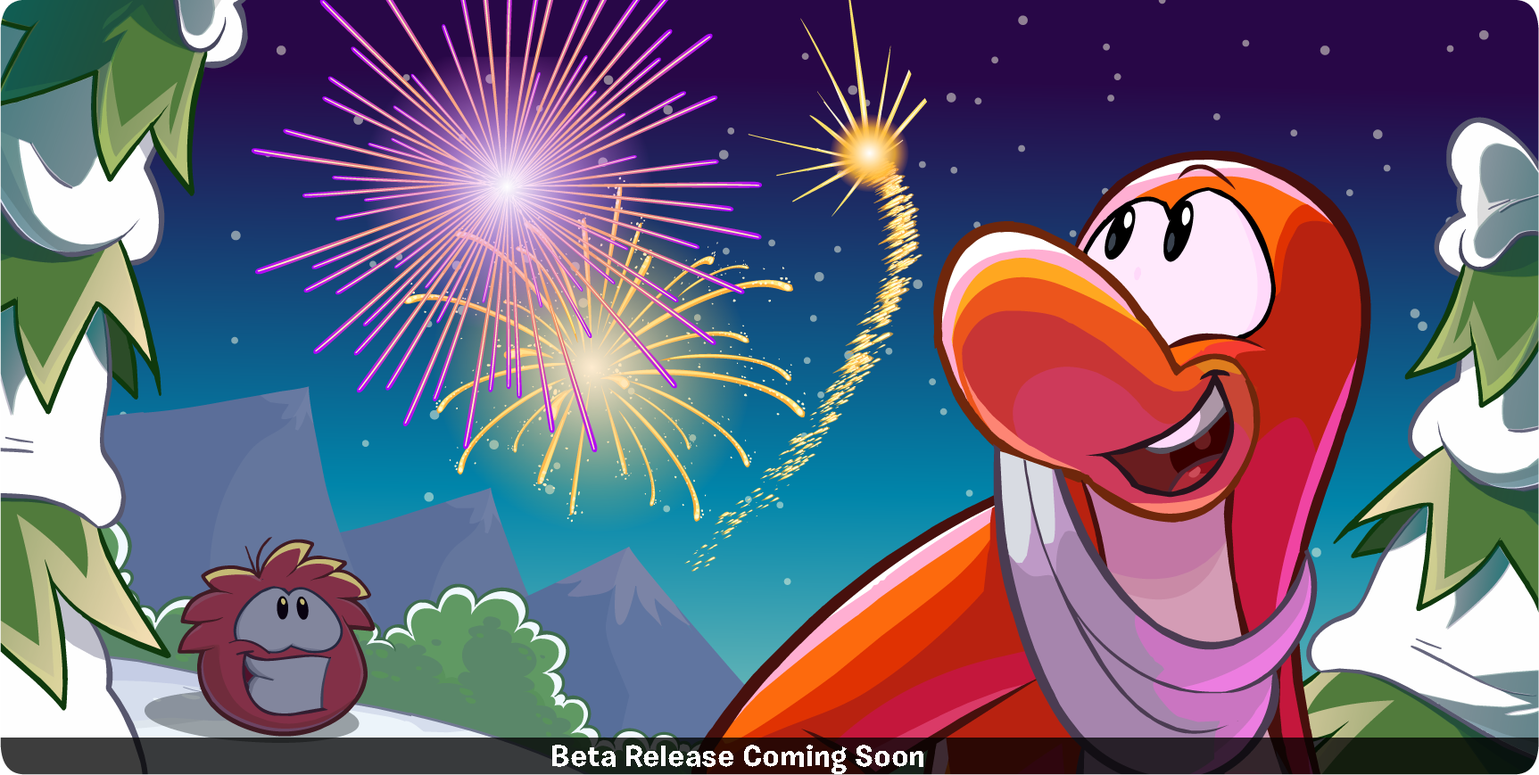
<style>
.page{position:relative;width:1539px;height:775px}
.page>*{position:absolute;margin:0}
.t1{font:29.7px "BurbankSmall-Bold";color:#ffffff}
</style>
<div class="page">
<p class="t1" style="left:552px;top:745px;width:371px;height:29px">Beta Release Coming Soon</p>
</div>
